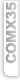
<style>
.page{position:relative;width:20px;height:80px;background:#ffffff}
.page>*{position:absolute;margin:0}
.t1{font:14px "Arial-Black";letter-spacing:-0.05em;color:#bababa;text-transform:uppercase}
</style>
<div class="page">
<p class="t1" style="left:5px;top:2px;width:12px;height:62px;rotate:-90deg">Comx35</p>
</div>
